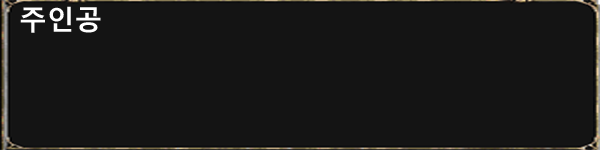
<style>
.page{position:relative;width:600px;height:150px;background:#141414}
.page>*{position:absolute;margin:0}
.t1{font:27.8px "MalgunGothicBold";color:#ffffff}
</style>
<div class="page">
<p class="t1" style="left:20px;top:6px;width:81px;height:27px">주인공</p>
</div>
